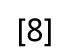
<style>
.page{position:relative;width:70px;height:55px;background:#ffffff}
.page>*{position:absolute;margin:0}
.t1{font:31.8px "DroidSans";color:#000000}
</style>
<div class="page">
<p class="t1" style="left:19px;top:18px;width:32px;height:29px">[8]</p>
</div>
